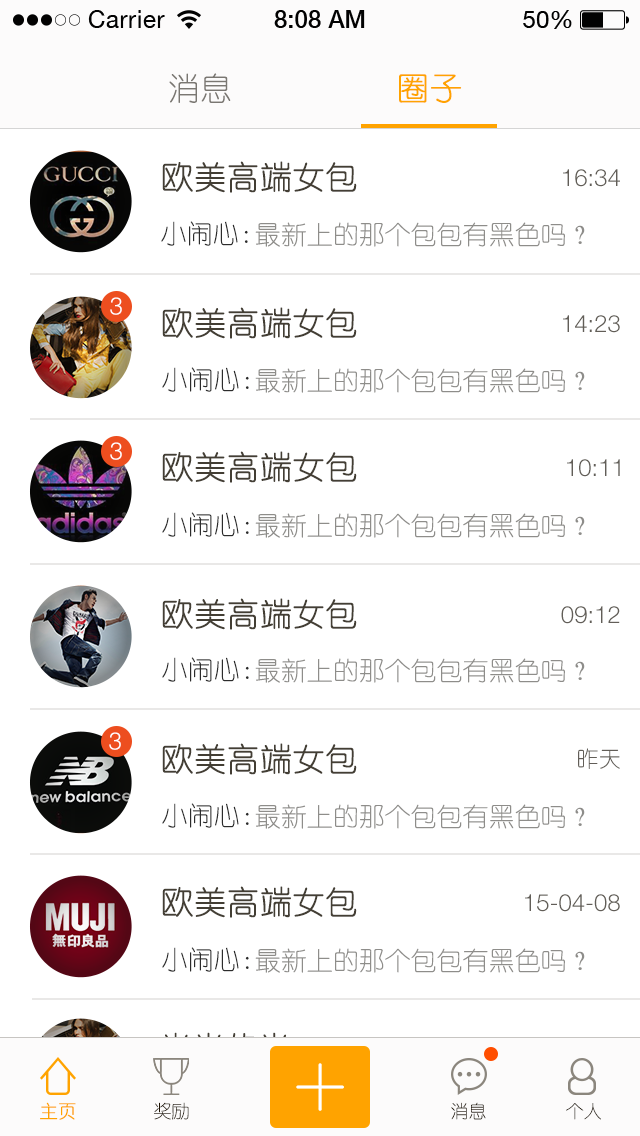
<style>
.page{position:relative;width:640px;height:1136px;background:#ffffff}
.page>*{position:absolute;margin:0}
.t1{font:32px "YouYuan";color:#7a7772;text-transform:uppercase}
.t2{font:32px "YouYuan";color:#ffa300;text-transform:uppercase;font-weight:bold}
.t3{font:32px "YouYuan";color:#433e34;text-transform:uppercase;font-weight:bold}
.t4{font:24px "HelveticaNeueLTPro-Lt";color:#625e58;text-transform:uppercase}
.t5{font:26px "YouYuan";color:#2c2c2c;text-transform:uppercase}
.t6{font:26px "YouYuan";color:#8e8d8a;text-transform:uppercase}
.t7{font:24px "Helvetica-Light";color:#ffffff;text-transform:uppercase}
.t8{font:22px "YouYuan";color:#625e58;text-transform:uppercase}
.t9{font:18px "YouYuan";color:#ffa300;font-weight:bold}
.t10{font:18px "YouYuan";color:#1b1000;text-transform:uppercase}
.t11{font:18px "YouYuan";text-transform:uppercase}
</style>
<div class="page">
<p class="t1" style="left:169px;top:73px;width:62px;height:30px">消息</p>
<p class="t2" style="left:399px;top:74px;width:63px;height:29px">圈子</p>
<p class="t3" style="left:162px;top:161px;width:195px;height:32px">欧美高端女包</p>
<p class="t4" style="left:563px;top:169px;width:57px;height:18px">16:34</p>
<p class="t5" style="left:161px;top:221px;width:87px;height:25px">小闹心：</p>
<p class="t6" style="left:255px;top:222px;width:330px;height:25px">最新上的那个包包有黑色吗？</p>
<p class="t7" style="left:110px;top:297px;width:12px;height:18px">3</p>
<p class="t3" style="left:162px;top:307px;width:195px;height:32px">欧美高端女包</p>
<p class="t4" style="left:563px;top:315px;width:57px;height:18px">14:23</p>
<p class="t5" style="left:162px;top:367px;width:87px;height:25px">小闹心：</p>
<p class="t6" style="left:255px;top:368px;width:330px;height:25px">最新上的那个包包有黑色吗？</p>
<p class="t7" style="left:110px;top:442px;width:12px;height:18px">3</p>
<p class="t3" style="left:162px;top:451px;width:195px;height:32px">欧美高端女包</p>
<p class="t4" style="left:567px;top:459px;width:53px;height:18px">10:11</p>
<p class="t5" style="left:162px;top:512px;width:87px;height:25px">小闹心：</p>
<p class="t6" style="left:255px;top:513px;width:330px;height:25px">最新上的那个包包有黑色吗？</p>
<p class="t3" style="left:162px;top:598px;width:195px;height:32px">欧美高端女包</p>
<p class="t4" style="left:561px;top:606px;width:59px;height:18px">09:12</p>
<p class="t5" style="left:162px;top:657px;width:87px;height:25px">小闹心：</p>
<p class="t6" style="left:255px;top:658px;width:330px;height:25px">最新上的那个包包有黑色吗？</p>
<p class="t7" style="left:109px;top:732px;width:12px;height:18px">3</p>
<p class="t3" style="left:162px;top:743px;width:195px;height:32px">欧美高端女包</p>
<p class="t8" style="left:578px;top:748px;width:42px;height:21px">昨天</p>
<p class="t5" style="left:162px;top:803px;width:87px;height:25px">小闹心：</p>
<p class="t6" style="left:255px;top:804px;width:330px;height:25px">最新上的那个包包有黑色吗？</p>
<p class="t3" style="left:162px;top:886px;width:195px;height:32px">欧美高端女包</p>
<p class="t4" style="left:525px;top:894px;width:95px;height:18px">15-04-08</p>
<p class="t5" style="left:162px;top:947px;width:87px;height:25px">小闹心：</p>
<p class="t6" style="left:255px;top:948px;width:330px;height:25px">最新上的那个包包有黑色吗？</p>
<p class="t9" style="left:40px;top:1102px;width:36px;height:18px">主页</p>
<p class="t10" style="left:154px;top:1102px;width:35px;height:18px">奖励</p>
<p class="t11" style="left:451px;top:1102px;width:35px;height:18px">消息</p>
<p class="t11" style="left:566px;top:1103px;width:35px;height:17px">个人</p>
</div>
